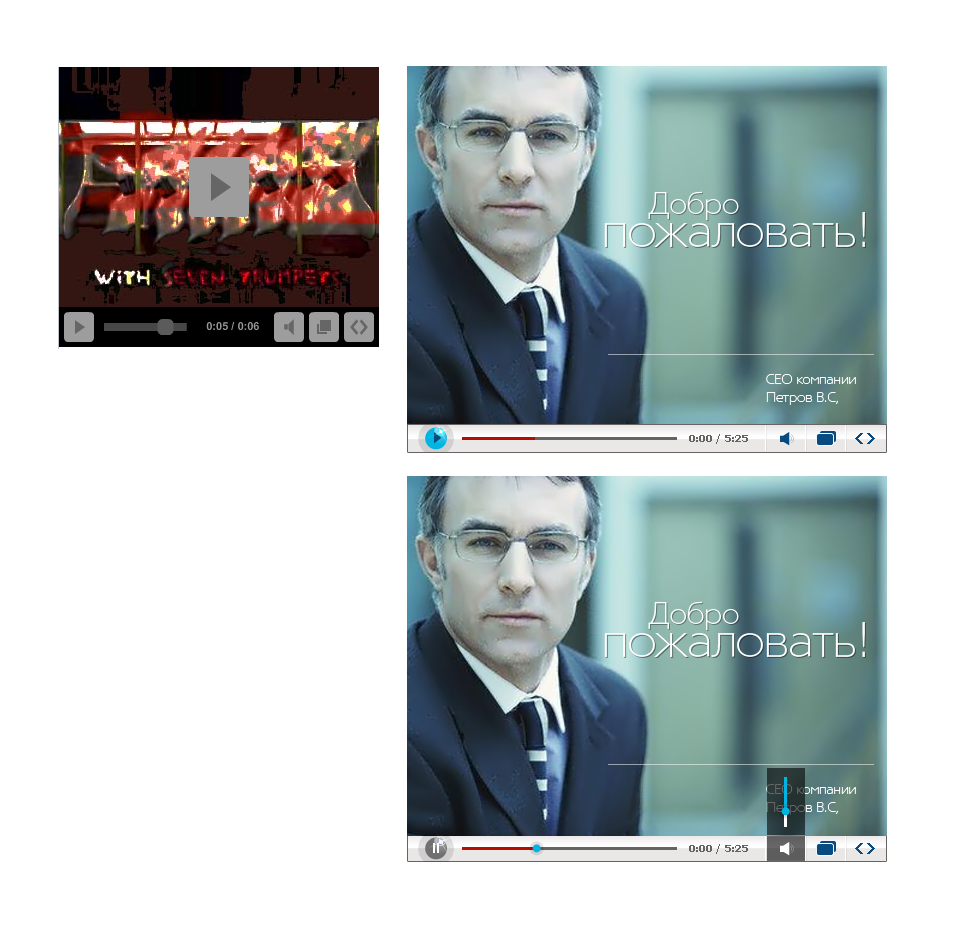
<style>
.page{position:relative;width:953px;height:930px;background:#ffffff}
.page>*{position:absolute;margin:0}
.t1{font:30px "TornadoThinC";color:#ffffff}
.t2{font:48px "TornadoThinC";color:#fffffe}
.t3{font:14px/18px "TornadoThinC";color:#ffffff}
.t4{font:10px "Tahoma-Bold";color:#666362}
.t5{font:14px/18px "TornadoThinC"}
</style>
<div class="page">
<p class="t1" style="left:648px;top:191px;width:91px;height:29px">Добро</p>
<p class="t2" style="left:604px;top:212px;width:261px;height:35px">пожаловать!</p>
<p class="t3" style="left:766px;top:374px;width:90px;height:31px">CEO компании<br>Петров В.С,</p>
<p class="t4" style="left:689px;top:434px;width:59px;height:10px">0:00 / 5:25</p>
<p class="t1" style="left:648px;top:601px;width:91px;height:29px">Добро</p>
<p class="t2" style="left:604px;top:622px;width:261px;height:35px">пожаловать!</p>
<p class="t5" style="left:766px;top:784px;width:90px;height:31px">CEO компании<br>Петров В.С,</p>
<p class="t4" style="left:689px;top:844px;width:59px;height:10px">0:00 / 5:25</p>
</div>
